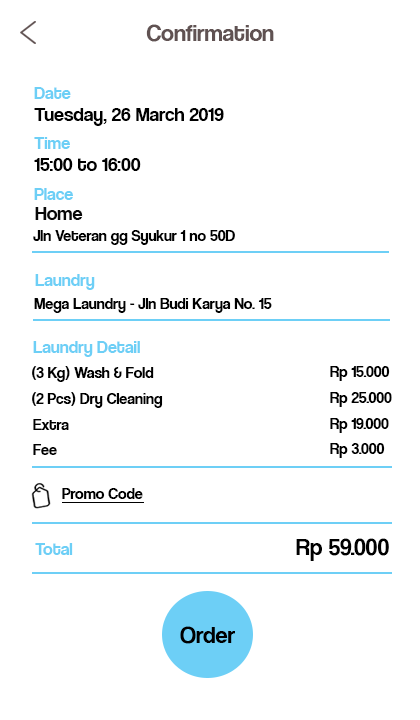
<style>
.page{position:relative;width:420px;height:720px;background:#ffffff}
.page>*{position:absolute;margin:0}
.t1{font:24px "CoolveticaRg-Regular";color:#605252}
.t2{font:18px "CoolveticaRg-Regular";color:#6dcff6}
.t3{font:20px "CoolveticaRg-Regular";color:#000000}
.t4{font:20px "CoolveticaRg-Regular";color:#090909}
.t5{font:16px "CoolveticaRg-Regular";color:#000000}
.t6{font:24px "CoolveticaRg-Regular";color:#000000}
</style>
<div class="page">
<p class="t1" style="left:146px;top:24px;width:128px;height:18px">Confirmation</p>
<p class="t2" style="left:34px;top:87px;width:37px;height:12px">Date</p>
<p class="t3" style="left:34px;top:108px;width:190px;height:18px">Tuesday, 26 March 2019</p>
<p class="t2" style="left:34px;top:137px;width:36px;height:12px">Time</p>
<p class="t3" style="left:34px;top:158px;width:107px;height:13px">15:00 to 16:00</p>
<p class="t2" style="left:34px;top:188px;width:39px;height:12px">Place</p>
<p class="t4" style="left:35px;top:207px;width:48px;height:13px">Home</p>
<p class="t5" style="left:33px;top:230px;width:202px;height:15px">Jln Veteran gg Syukur 1 no 50D</p>
<p class="t2" style="left:35px;top:274px;width:60px;height:16px">Laundry</p>
<p class="t5" style="left:34px;top:298px;width:238px;height:15px">Mega Laundry - Jln Budi Karya No. 15</p>
<p class="t2" style="left:33px;top:341px;width:107px;height:16px">Laundry Detail</p>
<p class="t5" style="left:32px;top:366px;width:122px;height:16px">(3 Kg) Wash &amp; Fold</p>
<p class="t5" style="left:330px;top:366px;width:60px;height:15px">Rp 15.000</p>
<p class="t5" style="left:32px;top:392px;width:131px;height:16px">(2 Pcs) Dry Cleaning</p>
<p class="t5" style="left:330px;top:392px;width:62px;height:15px">Rp 25.000</p>
<p class="t5" style="left:33px;top:419px;width:36px;height:11px">Extra</p>
<p class="t5" style="left:330px;top:418px;width:59px;height:15px">Rp 19.000</p>
<p class="t5" style="left:33px;top:444px;width:24px;height:11px">Fee</p>
<p class="t5" style="left:330px;top:443px;width:55px;height:15px">Rp 3.000</p>
<p class="t5" style="left:62px;top:488px;width:81px;height:11px">Promo Code</p>
<p class="t2" style="left:35px;top:543px;width:38px;height:12px">Total</p>
<p class="t6" style="left:296px;top:538px;width:93px;height:23px">Rp 59.000</p>
<p class="t6" style="left:180px;top:626px;width:55px;height:18px">Order</p>
</div>
